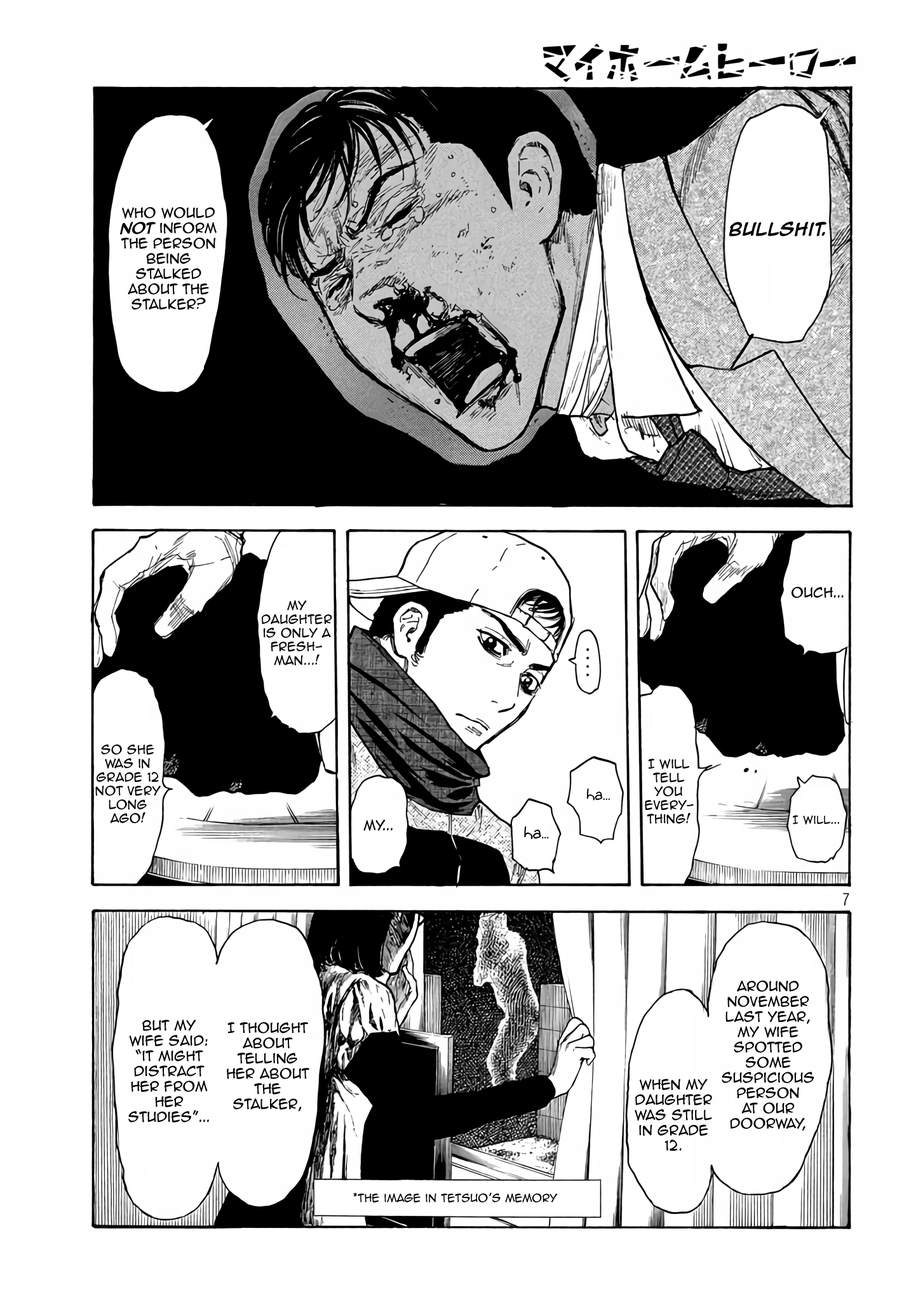
<style>
.page{position:relative;width:916px;height:1301px;background:#ffffff}
.page>*{position:absolute;margin:0}
.t1{font:12.7px "AnimeAce2.0BB";color:#000000}
.t2{font:12.7px "AnimeAce2.0BB-Bold";color:#000000}
.t3{font:15.3px "AnimeAce2.0BB-Bold";color:#000000}
.t4{font:11.4px "AnimeAce2.0BB";color:#000000}
.t5{font:15.9px "Augie";color:#000000}
.t6{font:10.2px "AnimeAce2.0BB";color:#000000}
.t7{font:17.2px "Augie";color:#000000}
</style>
<div class="page">
<p class="t1" style="left:120px;top:207px;width:97px;height:103px;text-align:center">who would <span class="t2">not</span> inform the person being stalked about the stalker?</p>
<p class="t3" style="left:729px;top:221px;width:98px;height:15px">Bullshit.</p>
<p class="t1" style="left:792px;top:587px;width:52px;height:12px">Ouch...</p>
<p class="t4" style="left:262px;top:600px;width:70px;height:66px;text-align:center">My daughter is only a fresh-<br>man...!</p>
<p class="t4" style="left:95px;top:745px;width:66px;height:79px;text-align:center">so She <br>was in grade 12 not very long ago!</p>
<p class="t4" style="left:645px;top:759px;width:49px;height:65px;text-align:center">I will tell you every-thing!</p>
<p class="t5" style="left:587px;top:789px;width:23px;height:12px">ha...</p>
<p class="t1" style="left:363px;top:820px;width:30px;height:11px">my...</p>
<p class="t6" style="left:793px;top:815px;width:46px;height:10px">I will...</p>
<p class="t7" style="left:524px;top:826px;width:25px;height:13px">ha...</p>
<p class="t1" style="left:722px;top:980px;width:93px;height:151px;text-align:center">Around November last year, My wife spotted some suspicious <br>person <br>at our doorway,</p>
<p class="t1" style="left:128px;top:1020px;width:81px;height:103px;text-align:center">but my <br>wife said: “it might distract <br>her from her studies”...</p>
<p class="t1" style="left:227px;top:1022px;width:82px;height:90px;text-align:center">I thought about telling her about the stalker,</p>
<p class="t1" style="left:635px;top:1079px;width:77px;height:72px;text-align:center">When my daughter was still in grade 12.</p>
<p class="t6" style="left:353px;top:1193px;width:205px;height:10px">*The image in Tetsuo’s memory</p>
</div>
